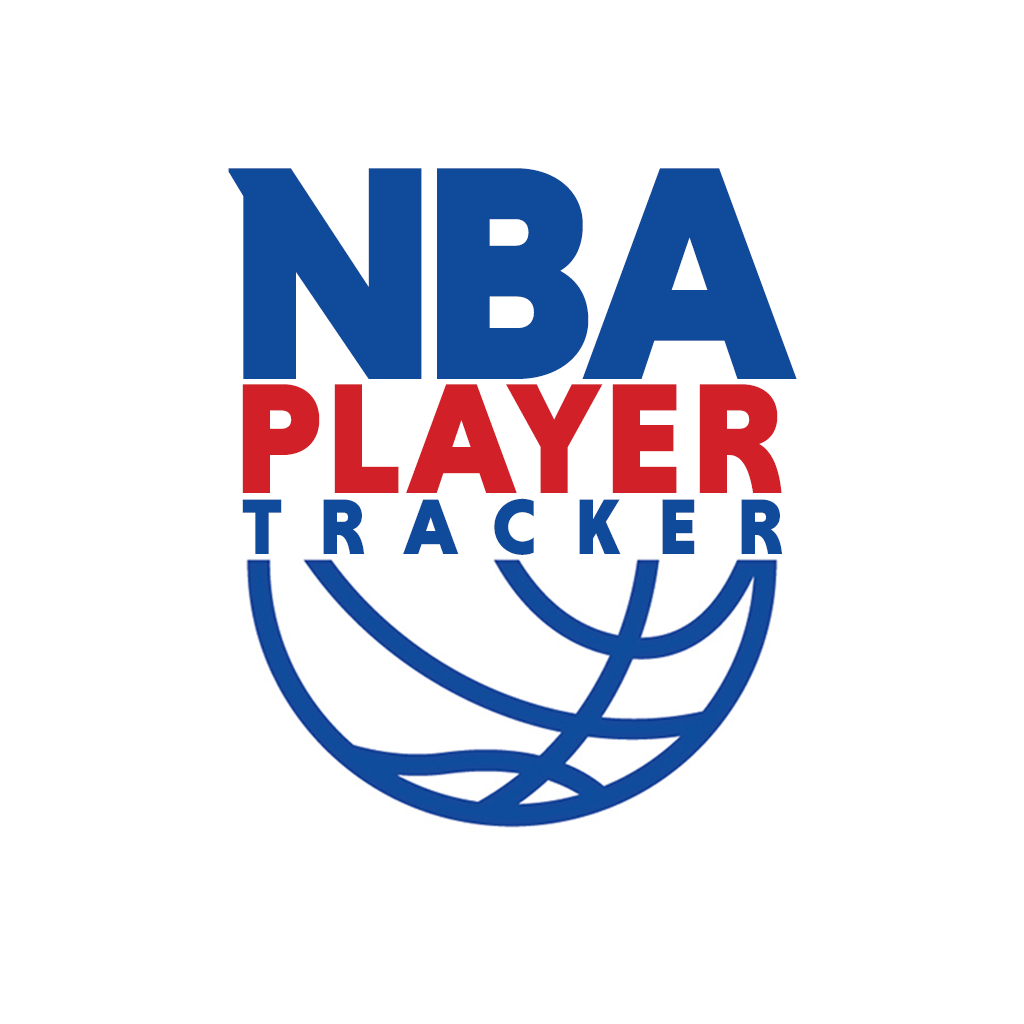
<style>
.page{position:relative;width:1024px;height:1024px;background:#ffffff}
.page>*{position:absolute;margin:0}
.t1{font:310px "NiveauGroteskBlack";letter-spacing:-0.015em;color:#104b9b}
.t2{font:160px "NiveauGroteskBlack";letter-spacing:0.03em;color:#d12027}
.t3{font:80px "NiveauGroteskBlack";letter-spacing:0.47em;color:#104b9b}
</style>
<div class="page">
<p class="t1" style="left:228px;top:168px;width:569px;height:211px">NBA</p>
<p class="t2" style="left:242px;top:384px;width:540px;height:109px">PLAYER</p>
<p class="t3" style="left:242px;top:498px;width:540px;height:57px">TRACKER</p>
</div>
